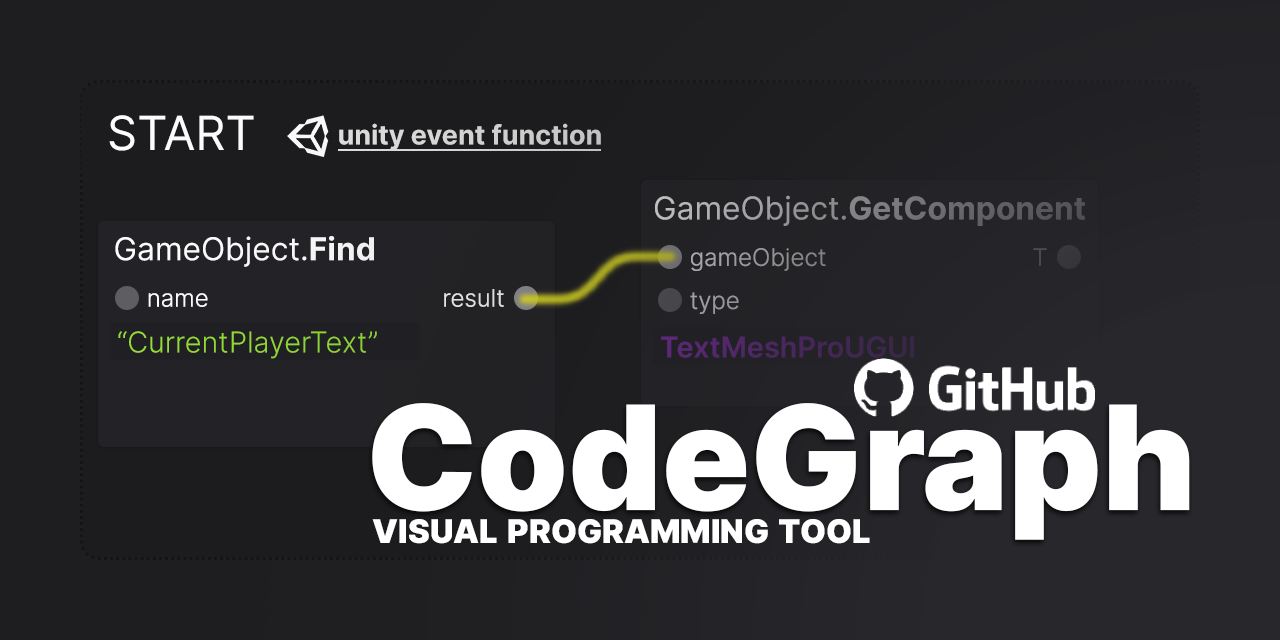
<style>
.page{position:relative;width:1280px;height:640px}
.page>*{position:absolute;margin:0}
.t1{font:67.4px "Inter-Regular";color:#ffffff;font-variant:small-caps}
.t2{font:26.9px "Inter-Bold";color:#e3e3e3}
.t3{font:31.7px "Inter-Bold"}
.t4{font:31.7px "Inter-Regular"}
.t5{font:31.7px "Inter-Regular";color:#ffffff}
.t6{font:31.7px "Inter-Bold";color:#ffffff}
.t7{font:24px "Inter-LightBETA";color:#969698}
.t8{font:24px "Inter-LightBETA";color:#4b4b4f}
.t9{font:24px "Inter-LightBETA";color:#ffffff}
.t10{font:24px "Inter-LightBETA";color:#dededf}
.t11{font:24px "Inter-LightBETA";color:#99999b}
.t12{font:28.8px "Inter-LightBETA";color:#96df38}
.t13{font:28.8px "Inter-SemiBold";color:#49275c}
.t14{font:145px "Inter-Black";color:#ffffff}
.t15{font:46.6px "Inter-Black";color:#ffffff;font-variant:small-caps}
</style>
<div class="page">
<p class="t1" style="left:109px;top:115px;width:145px;height:36px">start</p>
<p class="t2" style="left:339px;top:123px;width:262px;height:27px">unity event function</p>
<p class="t3" style="left:655px;top:195px;width:431px;height:31px"><span class="t4">GameObject.</span>GetComponent</p>
<p class="t5" style="left:115px;top:236px;width:259px;height:31px">GameObject.<span class="t6">Find</span></p>
<p class="t7" style="left:691px;top:248px;width:135px;height:23px">gameObject</p>
<p class="t8" style="left:1033px;top:248px;width:14px;height:18px">T</p>
<p class="t9" style="left:148px;top:293px;width:60px;height:14px">name</p>
<p class="t10" style="left:444px;top:289px;width:60px;height:18px">result</p>
<p class="t11" style="left:690px;top:292px;width:49px;height:22px">type</p>
<p class="t12" style="left:118px;top:331px;width:259px;height:28px">“CurrentPlayerText”</p>
<p class="t13" style="left:661px;top:336px;width:253px;height:22px">TextMeshProUGUI</p>
<p class="t14" style="left:372px;top:403px;width:818px;height:137px">CodeGraph</p>
<p class="t15" style="left:372px;top:519px;width:498px;height:25px">visual programming tool</p>
</div>
